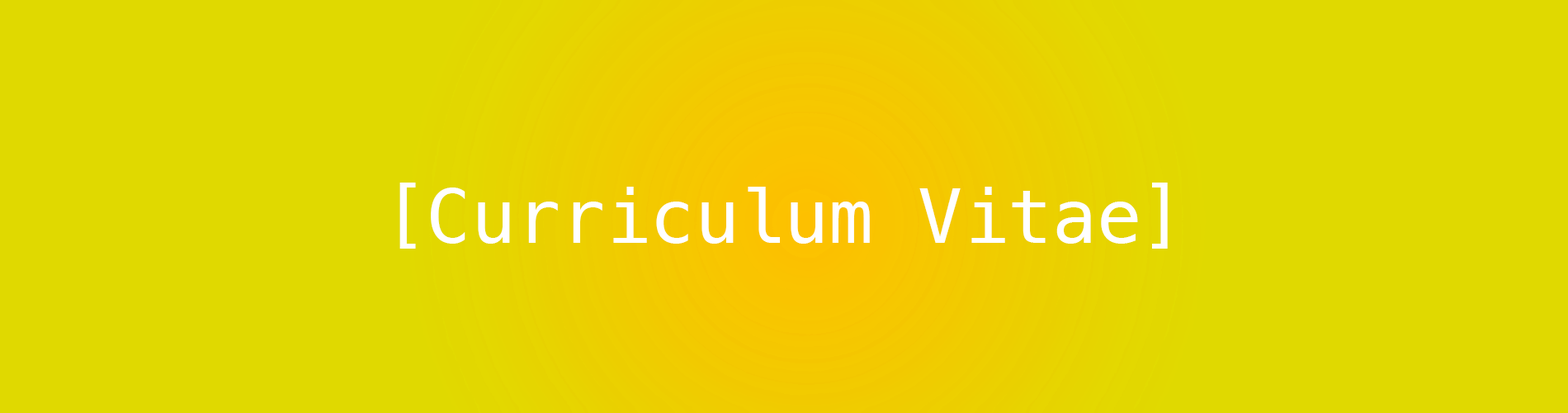
<style>
.page{position:relative;width:1568px;height:413px;background:#e0d900}
.page>*{position:absolute;margin:0}
.t1{font:74.3px "Menlo-Regular";color:#ffffff}
</style>
<div class="page">
<p class="t1" style="left:399px;top:182px;width:769px;height:66px">[Curriculum Vitae]</p>
</div>
